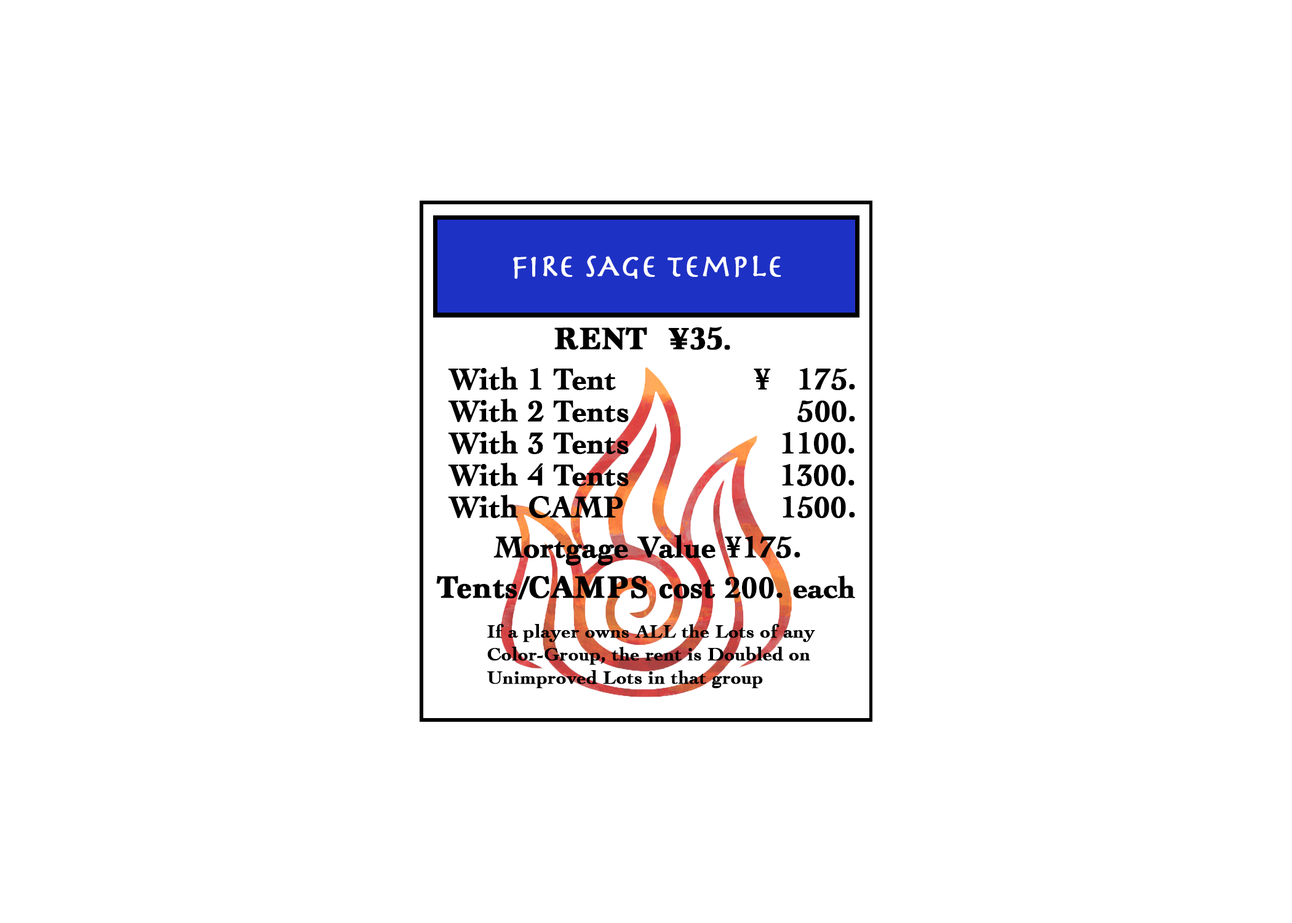
<style>
.page{position:relative;width:1292px;height:923px;background:#ffffff}
.page>*{position:absolute;margin:0}
.t1{font:32px "Herculanum";color:#ffffff;font-weight:bold}
.t2{font:32px "Marion-Bold";color:#000000;font-weight:bold}
.t3{font:30.8px "Cochin-Bold";color:#000000;font-weight:bold}
.t4{font:19.2px "Cochin-Bold";color:#000000;font-weight:bold}
</style>
<div class="page">
<p class="t1" style="left:513px;top:255px;width:268px;height:24px">fiRe sAge temple</p>
<p class="t2" style="left:554px;top:327px;width:176px;height:23px">RENT  ¥35.</p>
<p class="t3" style="left:448px;top:367px;width:407px;height:23px">With 1 Tent               ¥   175.</p>
<p class="t3" style="left:448px;top:399px;width:407px;height:23px">With 2 Tents                   500.</p>
<p class="t3" style="left:448px;top:431px;width:407px;height:23px">With 3 Tents                 1100.</p>
<p class="t3" style="left:448px;top:463px;width:407px;height:23px">With 4 Tents                 1300.</p>
<p class="t3" style="left:448px;top:495px;width:407px;height:23px">With CAMP                1500.</p>
<p class="t3" style="left:493px;top:535px;width:307px;height:30px">Mortgage Value ¥175.</p>
<p class="t2" style="left:436px;top:575px;width:419px;height:25px">Tents/CAMPS cost <span class="t3">200. each</span></p>
<p class="t4" style="left:487px;top:624px;width:328px;height:64px">If a player owns ALL the Lots of any <br>Color-Group, the rent is Doubled on <br>Unimproved Lots in that group</p>
</div>
